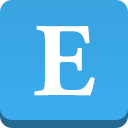
<style>
.page{position:relative;width:128px;height:128px}
.page>*{position:absolute;margin:0}
.t1{font:104px "AGaramondPro-Bold";color:#ffffff}
</style>
<div class="page">
<p class="t1" style="left:34px;top:25px;width:61px;height:71px">E</p>
</div>
